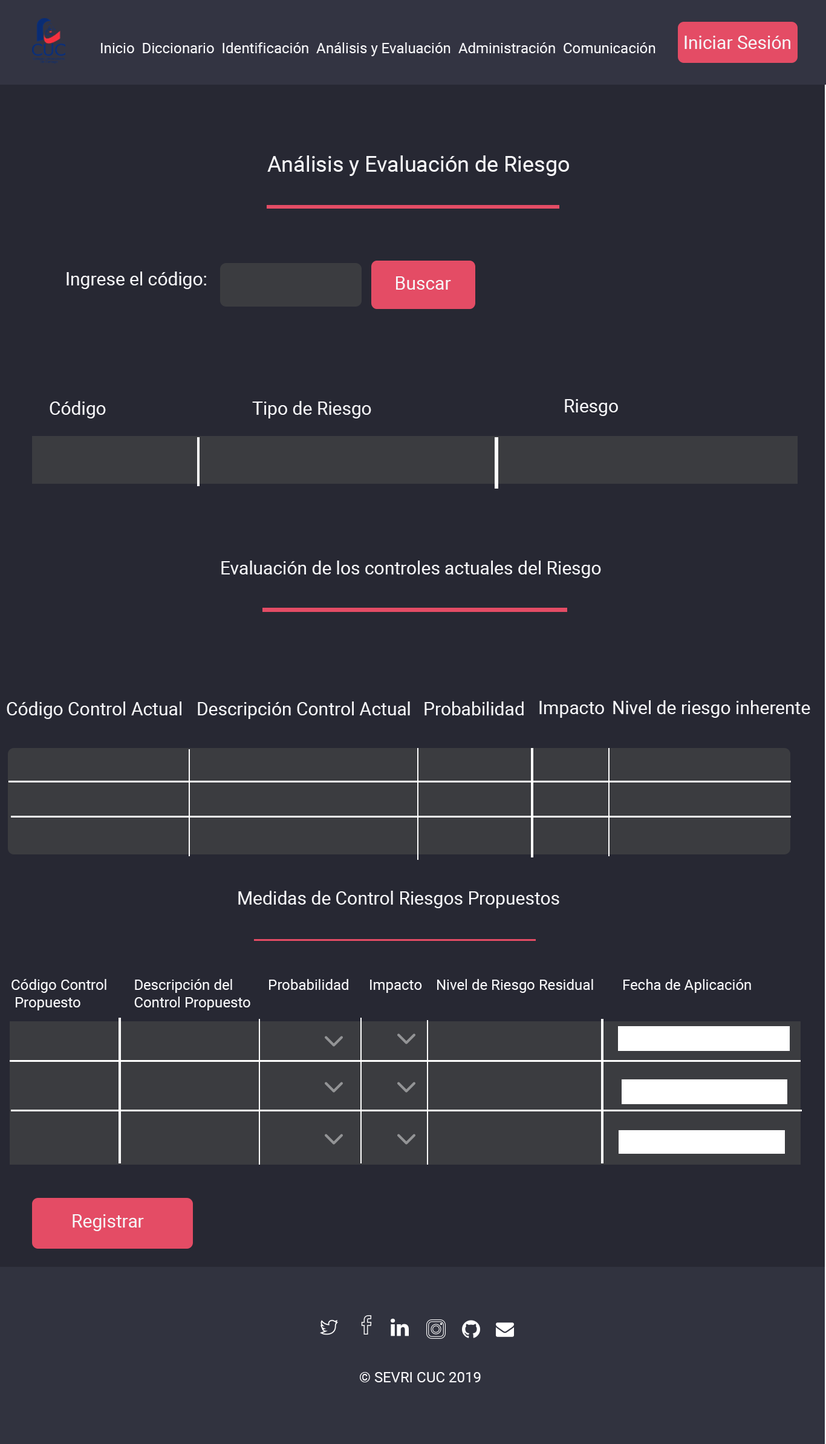
<style>
.page{position:relative;width:826px;height:1444px;background:#272833}
.page>*{position:absolute;margin:0}
.t1{font:18.1px "Roboto-Regular";color:#f6f6f9}
.t2{font:14.5px "Roboto-Regular";color:#f6f6f9}
.t3{font:21.8px "Roboto-Regular";color:#f6f6f9}
</style>
<div class="page">
<p class="t1" style="left:684px;top:36px;width:106px;height:13px">Iniciar Sesión</p>
<p class="t2" style="left:101px;top:42px;width:554px;height:14px">Inicio  Diccionario  Identificación  Análisis y Evaluación  Administración  Comunicación</p>
<p class="t3" style="left:267px;top:155px;width:302px;height:21px">Análisis y Evaluación de Riesgo</p>
<p class="t1" style="left:67px;top:271px;width:139px;height:18px">Ingrese el código:</p>
<p class="t1" style="left:396px;top:276px;width:55px;height:14px">Buscar</p>
<p class="t1" style="left:50px;top:401px;width:56px;height:17px">Código</p>
<p class="t1" style="left:252px;top:401px;width:119px;height:17px">Tipo de Riesgo</p>
<p class="t1" style="left:565px;top:399px;width:53px;height:17px">Riesgo</p>
<p class="t1" style="left:221px;top:560px;width:380px;height:18px">Evaluación de los controles actuales del Riesgo</p>
<p class="t1" style="left:7px;top:701px;width:174px;height:18px">Código Control Actual</p>
<p class="t1" style="left:198px;top:701px;width:212px;height:18px">Descripción Control Actual</p>
<p class="t1" style="left:424px;top:701px;width:100px;height:14px">Probabilidad</p>
<p class="t1" style="left:539px;top:701px;width:65px;height:17px">Impacto</p>
<p class="t1" style="left:613px;top:700px;width:197px;height:18px">Nivel de riesgo inherente</p>
<p class="t1" style="left:238px;top:891px;width:321px;height:17px">Medidas de Control Riesgos Propuestos</p>
<p class="t2" style="left:11px;top:979px;width:95px;height:31px">Código Control<br> Propuesto</p>
<p class="t2" style="left:134px;top:979px;width:116px;height:31px">Descripción del <br>Control Propuesto</p>
<p class="t2" style="left:269px;top:979px;width:79px;height:11px">Probabilidad</p>
<p class="t2" style="left:370px;top:979px;width:52px;height:14px">Impacto</p>
<p class="t2" style="left:437px;top:979px;width:156px;height:14px">Nivel de Riesgo Residual</p>
<p class="t2" style="left:623px;top:979px;width:128px;height:14px">Fecha de Aplicación</p>
<p class="t1" style="left:73px;top:1214px;width:71px;height:17px">Registrar</p>
<p class="t2" style="left:360px;top:1372px;width:121px;height:10px">© SEVRI CUC 2019</p>
</div>
